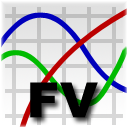
<style>
.page{position:relative;width:128px;height:128px}
.page>*{position:absolute;margin:0}
.t1{font:48px "Arial-Black";color:#000000;font-weight:bold}
</style>
<div class="page">
<p class="t1" style="left:30px;top:82px;width:68px;height:36px">FV</p>
</div>
